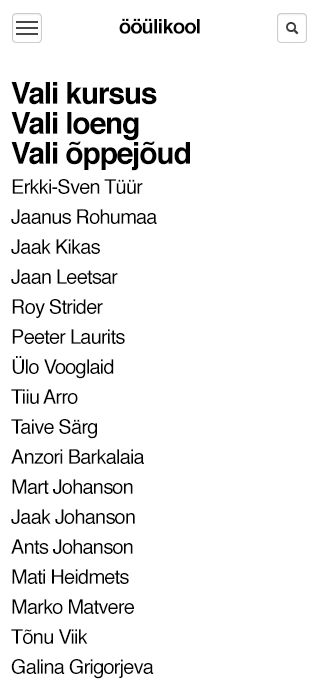
<style>
.page{position:relative;width:320px;height:700px;background:#ffffff}
.page>*{position:absolute;margin:0}
.t1{font:20px "Helvetica-Bold";letter-spacing:-0.04em;color:#000000}
.t2{font:20px/30px "Helvetica";letter-spacing:-0.04em;color:#000000}
.t3{font:30px/30px "Helvetica-Bold";letter-spacing:-0.04em;color:#000000}
</style>
<div class="page">
<p class="t1" style="left:119px;top:18px;width:81px;height:16px">ööülikool</p>
<p class="t2" style="left:11px;top:82px;width:179px;height:597px"><span class="t3">Vali kursus<br>Vali loeng<br>Vali õppejõud</span><br>Erkki-Sven Tüür<br>Jaanus Rohumaa<br>Jaak Kikas<br>Jaan Leetsar<br>Roy Strider<br>Peeter Laurits<br>Ülo Vooglaid<br>Tiiu Arro<br>Taive Särg<br>Anzori Barkalaia<br>Mart Johanson<br>Jaak Johanson<br>Ants Johanson<br>Mati Heidmets<br>Marko Matvere<br>Tõnu Viik<br>Galina Grigorjeva<br>Valdur Mikita</p>
</div>
